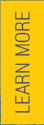
<style>
.page{position:relative;width:44px;height:125px;background:#ffcb0b}
.page>*{position:absolute;margin:0}
.t1{font:20px "RobotoCondensed-Light";color:#304956;text-transform:uppercase}
</style>
<div class="page">
<p class="t1" style="left:14px;top:11px;width:16px;height:102px;rotate:-90deg">LEARN MORE</p>
</div>
